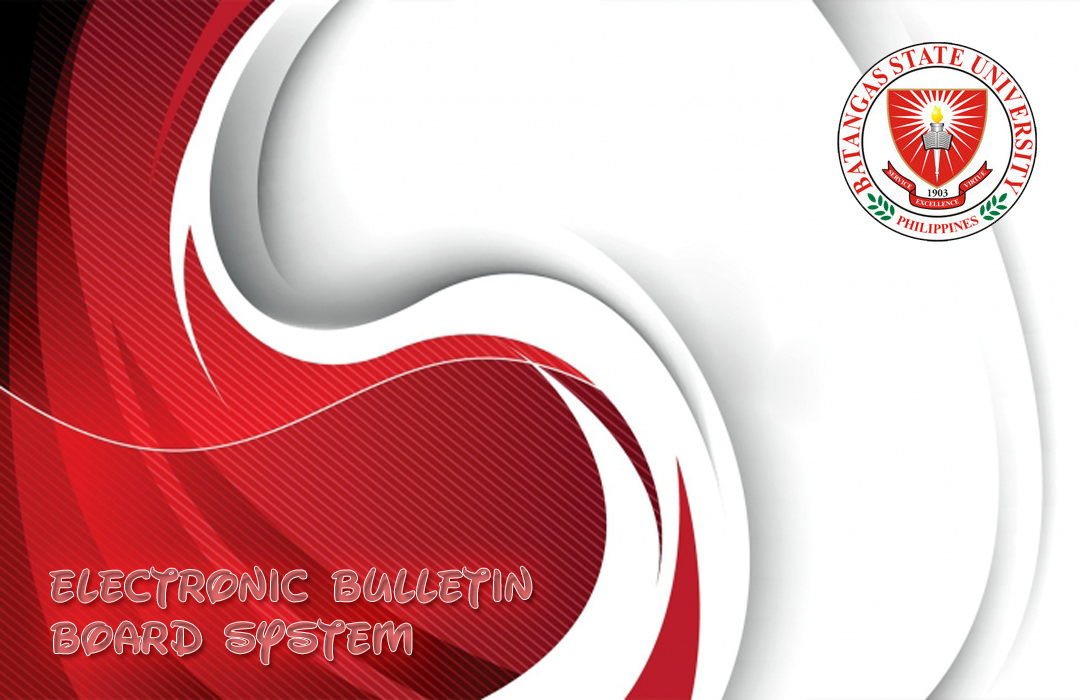
<style>
.page{position:relative;width:1080px;height:700px;background:#ffffff}
.page>*{position:absolute;margin:0}
.t1{font:43.5px "WaltographUI-Bold"}
</style>
<div class="page">
<p class="t1" style="left:50px;top:566px;width:482px;height:99px">Electronic bulletin <br>board system</p>
</div>
